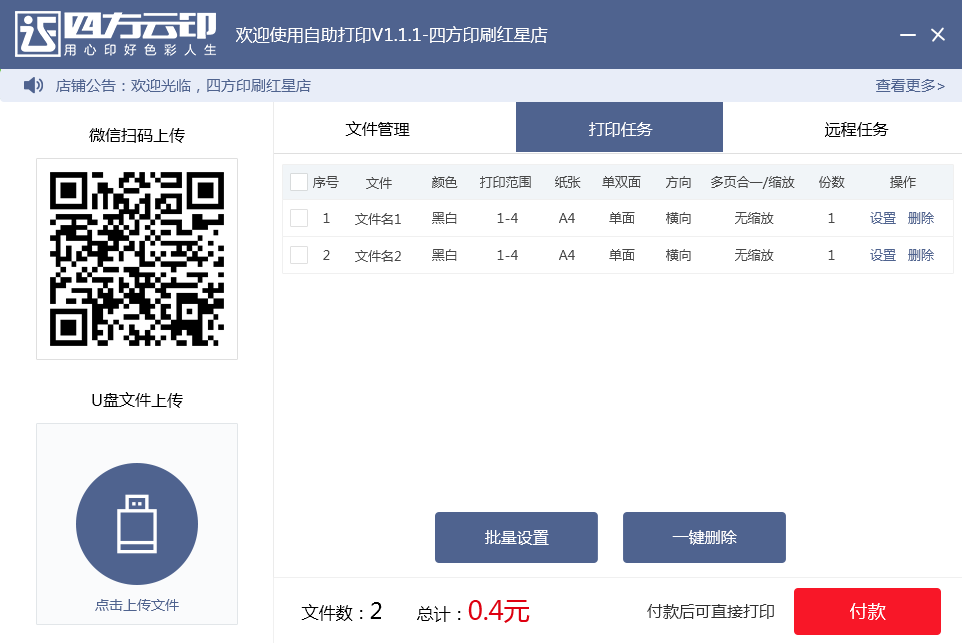
<style>
.page{position:relative;width:962px;height:643px;background:#ffffff}
.page>*{position:absolute;margin:0}
.t1{font:17px "MicrosoftYaHei";color:#ffffff}
.t2{font:15px "MicrosoftYaHei";color:#4f638f}
.t3{font:16px "MicrosoftYaHei";color:#000000}
.t4{font:16px "MicrosoftYaHei";color:#ffffff}
.t5{font:13px "MicrosoftYaHei";color:#474747}
.t6{font:13px "MicrosoftYaHei";color:#4f638f}
.t7{font:14px "MicrosoftYaHei";color:#4f638f}
.t8{font:17px "MicrosoftYaHei";color:#000000}
.t9{font:22px "MicrosoftYaHei";color:#000000}
.t10{font:26px "MicrosoftYaHei";color:#df0011}
.t11{font:12px "MicrosoftYaHei";color:#303030}
.t12{font:18px "MicrosoftYaHei";color:#ffffff}
</style>
<div class="page">
<p class="t1" style="left:236px;top:26px;width:312px;height:17px">欢迎使用自助打印V1.1.1-四方印刷红星店</p>
<p class="t2" style="left:56px;top:79px;width:255px;height:14px">店铺公告：欢迎光临，四方印刷红星店</p>
<p class="t2" style="left:876px;top:79px;width:69px;height:13px">查看更多&gt;</p>
<p class="t3" style="left:345px;top:121px;width:65px;height:15px">文件管理</p>
<p class="t4" style="left:589px;top:122px;width:64px;height:15px">打印任务</p>
<p class="t3" style="left:825px;top:122px;width:64px;height:15px">远程任务</p>
<p class="t3" style="left:89px;top:128px;width:96px;height:15px">微信扫码上传</p>
<p class="t5" style="left:313px;top:176px;width:26px;height:12px">序号</p>
<p class="t5" style="left:366px;top:177px;width:26px;height:12px">文件</p>
<p class="t5" style="left:432px;top:176px;width:26px;height:12px">颜色</p>
<p class="t5" style="left:480px;top:176px;width:51px;height:12px">打印范围</p>
<p class="t5" style="left:555px;top:176px;width:26px;height:12px">纸张</p>
<p class="t5" style="left:602px;top:176px;width:39px;height:12px">单双面</p>
<p class="t5" style="left:666px;top:176px;width:25px;height:12px">方向</p>
<p class="t5" style="left:711px;top:176px;width:84px;height:13px">多页合一/缩放</p>
<p class="t5" style="left:819px;top:176px;width:26px;height:12px">份数</p>
<p class="t5" style="left:890px;top:176px;width:26px;height:12px">操作</p>
<p class="t5" style="left:323px;top:213px;width:7px;height:10px">1</p>
<p class="t5" style="left:355px;top:213px;width:46px;height:12px">文件名1</p>
<p class="t5" style="left:432px;top:212px;width:25px;height:12px">黑白</p>
<p class="t5" style="left:497px;top:213px;width:21px;height:10px">1-4</p>
<p class="t5" style="left:559px;top:213px;width:16px;height:10px">A4</p>
<p class="t5" style="left:609px;top:212px;width:26px;height:12px">单面</p>
<p class="t5" style="left:666px;top:212px;width:25px;height:12px">横向</p>
<p class="t5" style="left:735px;top:212px;width:39px;height:12px">无缩放</p>
<p class="t5" style="left:828px;top:213px;width:7px;height:10px">1</p>
<p class="t6" style="left:870px;top:212px;width:64px;height:12px">设置   删除</p>
<p class="t5" style="left:323px;top:250px;width:7px;height:10px">2</p>
<p class="t5" style="left:355px;top:250px;width:46px;height:12px">文件名2</p>
<p class="t5" style="left:432px;top:249px;width:25px;height:12px">黑白</p>
<p class="t5" style="left:497px;top:250px;width:21px;height:10px">1-4</p>
<p class="t5" style="left:559px;top:250px;width:16px;height:10px">A4</p>
<p class="t5" style="left:609px;top:249px;width:26px;height:12px">单面</p>
<p class="t5" style="left:666px;top:249px;width:25px;height:12px">横向</p>
<p class="t5" style="left:735px;top:249px;width:39px;height:12px">无缩放</p>
<p class="t5" style="left:828px;top:250px;width:7px;height:10px">1</p>
<p class="t6" style="left:870px;top:249px;width:64px;height:12px">设置   删除</p>
<p class="t3" style="left:92px;top:392px;width:91px;height:16px">U盘文件上传</p>
<p class="t4" style="left:485px;top:530px;width:64px;height:15px">批量设置</p>
<p class="t4" style="left:672px;top:530px;width:65px;height:15px">一键删除</p>
<p class="t7" style="left:95px;top:599px;width:84px;height:12px">点击上传文件</p>
<p class="t8" style="left:301px;top:602px;width:81px;height:19px">文件数：<span class="t9">2</span></p>
<p class="t10" style="left:417px;top:600px;width:113px;height:23px"><span class="t8">总计：</span>0.4元</p>
<p class="t11" style="left:647px;top:604px;width:127px;height:15px">付款后可直接打印</p>
<p class="t12" style="left:850px;top:603px;width:36px;height:17px">付款</p>
</div>
